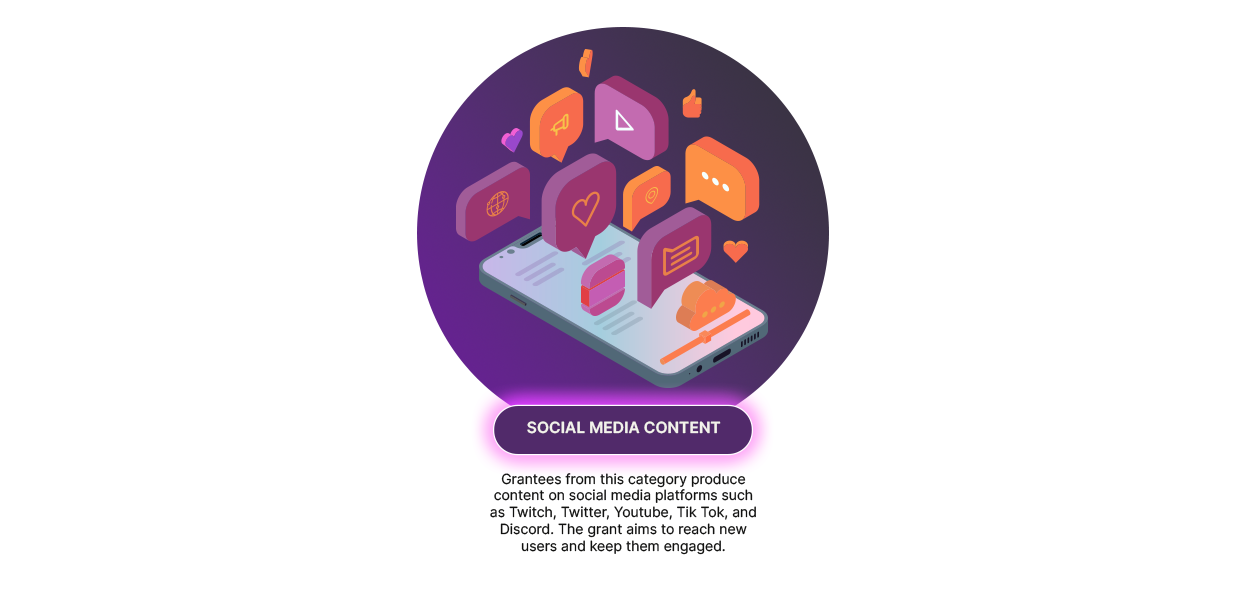
<style>
.page{position:relative;width:1240px;height:600px;background:#ffffff}
.page>*{position:absolute;margin:0}
.t1{font:15.4px "Inter-SemiBold";color:#f3f2eb;text-transform:uppercase}
.t2{font:14px "Inter-Regular";color:#111110}
</style>
<div class="page">
<p class="t1" style="left:527px;top:421px;width:194px;height:13px">Social Media Content</p>
<p class="t2" style="left:490px;top:473px;width:266px;height:82px;text-align:center">Grantees from this category produce content on social media platforms such as Twitch, Twitter, Youtube, Tik Tok, and Discord. The grant aims to reach new users and keep them engaged.</p>
</div>
